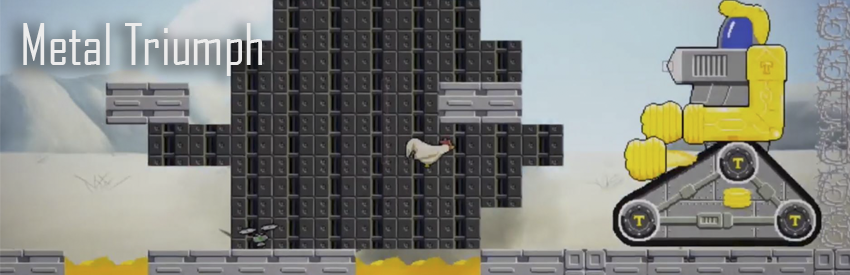
<style>
.page{position:relative;width:850px;height:275px}
.page>*{position:absolute;margin:0}
.t1{font:55.2px "AgencyFB-Reg";color:#ececec}
</style>
<div class="page">
<p class="t1" style="left:23px;top:23px;width:239px;height:53px">Metal Triumph</p>
</div>
